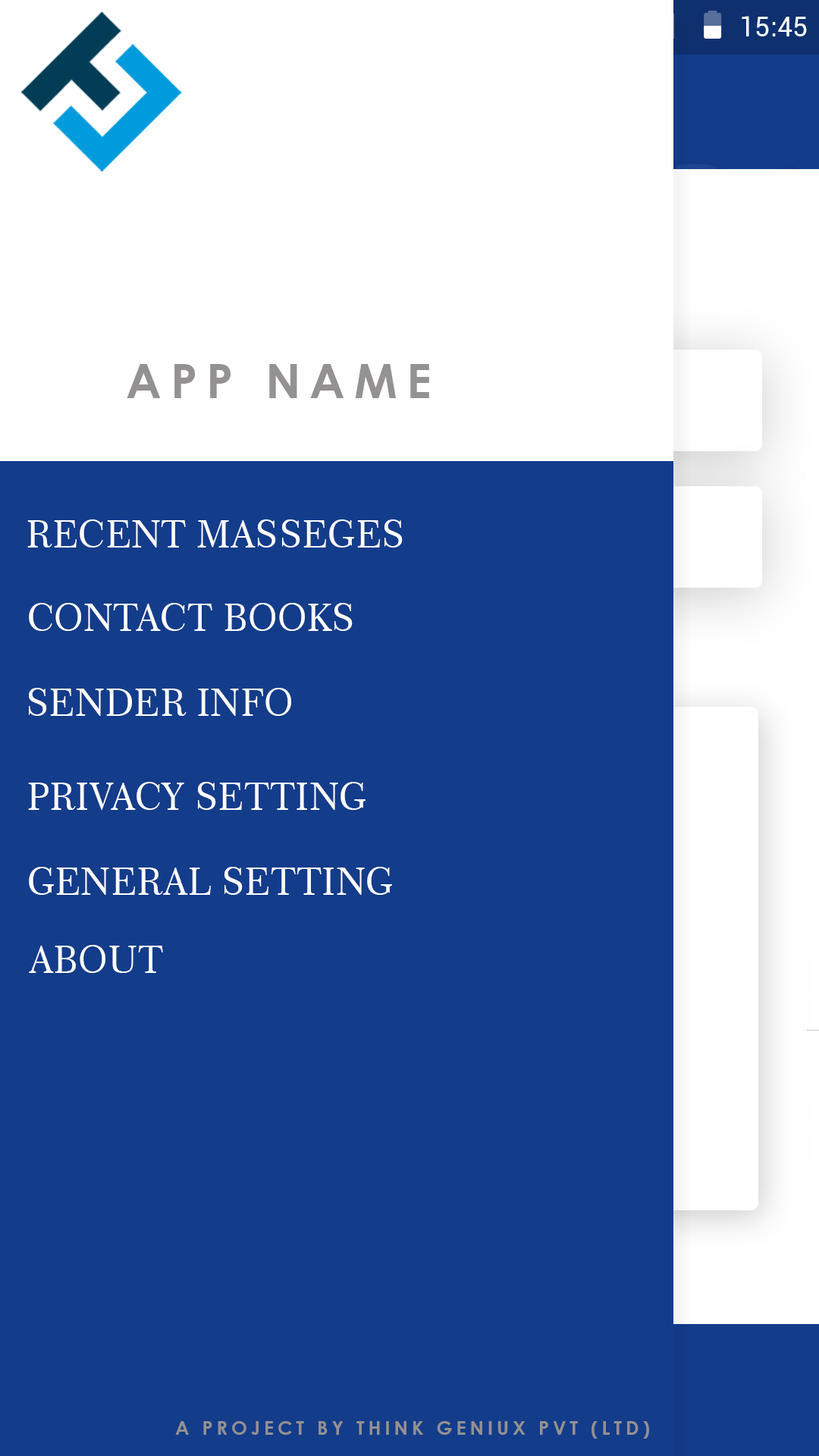
<style>
.page{position:relative;width:819px;height:1456px;background:#133c8b}
.page>*{position:absolute;margin:0}
.t1{font:47.4px "CenturyGothic-Bold";letter-spacing:0.2em;color:#939191;text-transform:uppercase}
.t2{font:37.9px "Century751BT-RomanNo2B";color:#ffffff;text-transform:uppercase}
.t3{font:19px "CenturyGothic-Bold";letter-spacing:0.2em;color:#939191;text-transform:uppercase}
</style>
<div class="page">
<p class="t1" style="left:127px;top:364px;width:302px;height:34px">APP NAME</p>
<p class="t2" style="left:27px;top:519px;width:376px;height:29px">Recent masseges</p>
<p class="t2" style="left:29px;top:603px;width:324px;height:28px">contact books</p>
<p class="t2" style="left:29px;top:688px;width:262px;height:28px">sender info</p>
<p class="t2" style="left:28px;top:782px;width:338px;height:28px">privacy setting</p>
<p class="t2" style="left:29px;top:867px;width:363px;height:28px">general setting</p>
<p class="t2" style="left:29px;top:945px;width:134px;height:28px">about</p>
<p class="t3" style="left:175px;top:1421px;width:474px;height:18px">A project by think geniux pvt (ltd)</p>
</div>
